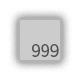
<style>
.page{position:relative;width:80px;height:80px;background:#ffffff}
.page>*{position:absolute;margin:0}
.t1{font:16.7px "SourceHanSansCN-Regular";color:#505050}
</style>
<div class="page">
<p class="t1" style="left:32px;top:44px;width:27px;height:13px">999</p>
</div>
